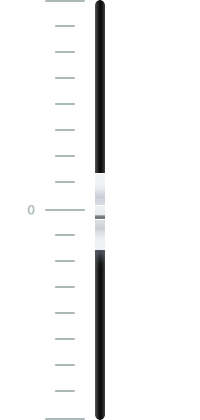
<style>
.page{position:relative;width:200px;height:420px;background:#ffffff}
.page>*{position:absolute;margin:0}
.t1{font:14px "MyriadPro-Regular";color:#adbaba;font-weight:bold}
</style>
<div class="page">
<p class="t1" style="left:27px;top:205px;width:8px;height:10px">0</p>
</div>
